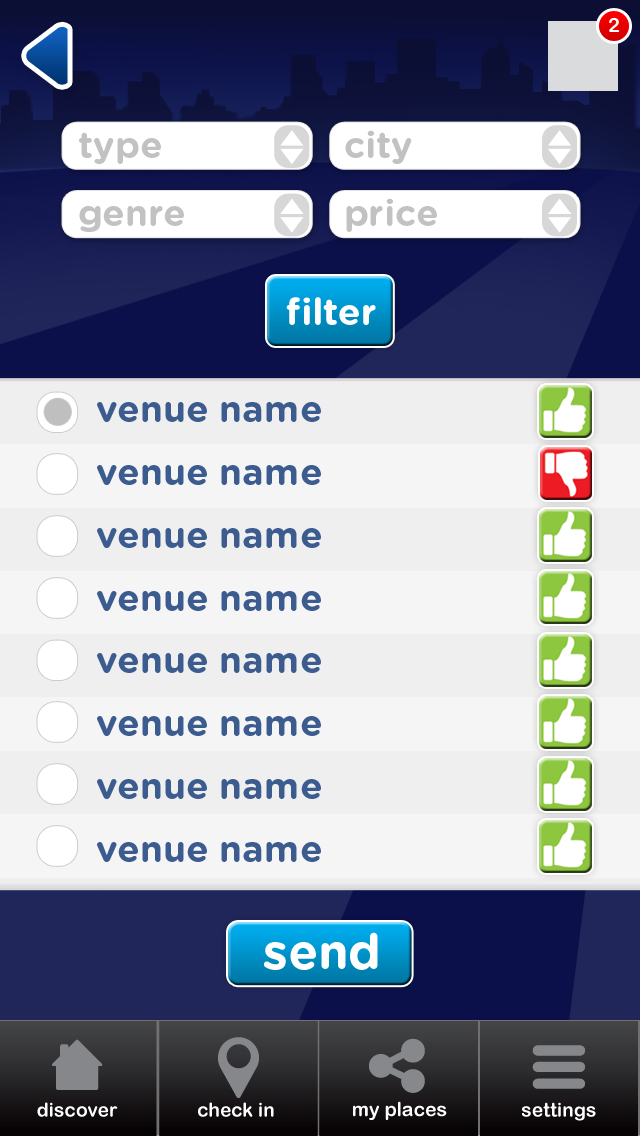
<style>
.page{position:relative;width:640px;height:1136px}
.page>*{position:absolute;margin:0}
.t1{font:20px "ArialRoundedMTBold";color:#ffffff}
.t2{font:37px "GothamRounded-Bold";color:#c2c2c2}
.t3{font:37.5px "GothamRounded-Bold";color:#ffffff}
.t4{font:37px "GothamRounded-Bold";color:#3c5c8f}
.t5{font:48.9px "GothamRounded-Bold";color:#ffffff}
</style>
<div class="page">
<p class="t1" style="left:609px;top:18px;width:11px;height:14px">2</p>
<p class="t2" style="left:79px;top:132px;width:82px;height:32px">type</p>
<p class="t2" style="left:345px;top:130px;width:67px;height:34px">city</p>
<p class="t2" style="left:346px;top:198px;width:91px;height:34px">price</p>
<p class="t2" style="left:79px;top:206px;width:105px;height:26px">genre</p>
<p class="t3" style="left:286px;top:297px;width:90px;height:28px">filter</p>
<p class="t4" style="left:97px;top:402px;width:224px;height:20px">venue name</p>
<p class="t4" style="left:97px;top:465px;width:224px;height:20px">venue name</p>
<p class="t4" style="left:97px;top:528px;width:224px;height:20px">venue name</p>
<p class="t4" style="left:97px;top:591px;width:224px;height:20px">venue name</p>
<p class="t4" style="left:97px;top:653px;width:224px;height:20px">venue name</p>
<p class="t4" style="left:97px;top:716px;width:224px;height:20px">venue name</p>
<p class="t4" style="left:97px;top:779px;width:224px;height:20px">venue name</p>
<p class="t4" style="left:97px;top:842px;width:224px;height:20px">venue name</p>
<p class="t5" style="left:264px;top:932px;width:114px;height:38px">send</p>
</div>
